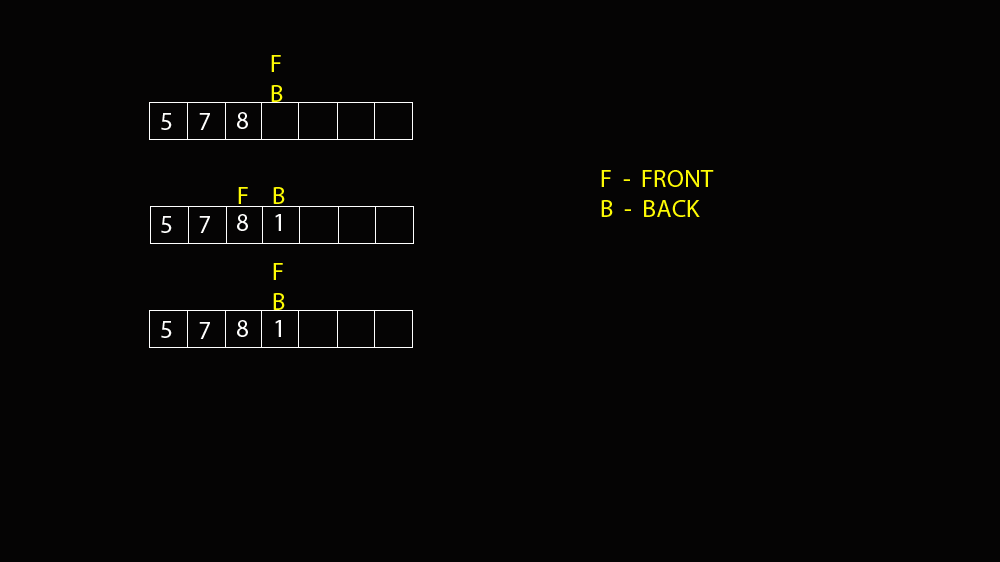
<style>
.page{position:relative;width:1000px;height:562px;background:#050404}
.page>*{position:absolute;margin:0}
.t1{font:25px "MyriadPro-Regular";color:#fefb04}
.t2{font:25px "MyriadPro-Regular";color:#fffffe}
.t3{font:25px "MyriadPro-Regular";color:#fefefe}
</style>
<div class="page">
<p class="t1" style="left:271px;top:55px;width:12px;height:47px">F<br>B</p>
<p class="t2" style="left:161px;top:113px;width:11px;height:17px">5</p>
<p class="t2" style="left:199px;top:113px;width:11px;height:17px">7</p>
<p class="t2" style="left:237px;top:112px;width:11px;height:17px">8</p>
<p class="t1" style="left:601px;top:170px;width:113px;height:47px">F  -  FRONT<br>B  -  BACK</p>
<p class="t1" style="left:238px;top:187px;width:10px;height:17px">F</p>
<p class="t1" style="left:273px;top:187px;width:12px;height:17px">B</p>
<p class="t2" style="left:161px;top:216px;width:11px;height:17px">5</p>
<p class="t2" style="left:199px;top:216px;width:11px;height:17px">7</p>
<p class="t2" style="left:237px;top:214px;width:11px;height:17px">8</p>
<p class="t3" style="left:275px;top:214px;width:6px;height:17px">1</p>
<p class="t1" style="left:273px;top:263px;width:12px;height:47px">F<br>B</p>
<p class="t2" style="left:161px;top:321px;width:11px;height:17px">5</p>
<p class="t2" style="left:199px;top:322px;width:11px;height:17px">7</p>
<p class="t2" style="left:237px;top:320px;width:11px;height:17px">8</p>
<p class="t3" style="left:275px;top:320px;width:6px;height:17px">1</p>
</div>
